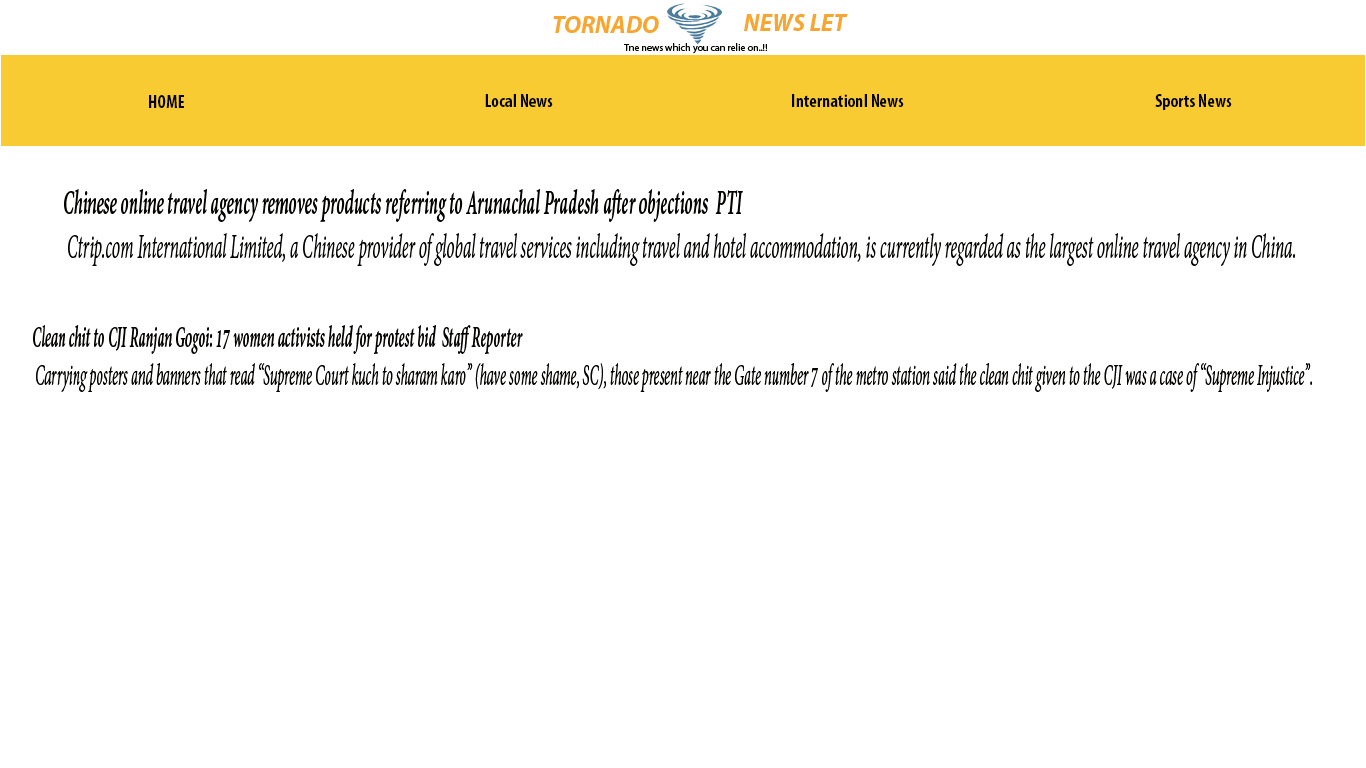
<style>
.page{position:relative;width:1366px;height:768px;background:#ffffff}
.page>*{position:absolute;margin:0}
.t1{font:24px "MyriadPro-BoldIt";color:#f7a631}
.t2{font:10px "MyriadPro-Regular";color:#060400}
.t3{font:18px "MyriadPro-BoldCond";color:#060400}
.t4{font:36.4px "AdobeDevanagari-Italic";color:#030200;scale:0.51 1}
.t5{font:36.4px "AdobeDevanagari-BoldItalic";color:#030200;scale:0.51 1}
.t6{font:31.9px "AdobeDevanagari-Italic";color:#030200;scale:0.48 1}
.t7{font:31.9px "AdobeDevanagari-BoldItalic";color:#030200;scale:0.48 1}
</style>
<div class="page">
<p class="t1" style="left:553px;top:16px;width:106px;height:17px">TORNADO</p>
<p class="t1" style="left:744px;top:14px;width:104px;height:17px">NEWS LET</p>
<p class="t2" style="left:624px;top:43px;width:143px;height:11px">Tne news which you can relie on..!!</p>
<p class="t3" style="left:149px;top:95px;width:35px;height:13px">HOME</p>
<p class="t3" style="left:485px;top:94px;width:68px;height:13px">Local News</p>
<p class="t3" style="left:792px;top:94px;width:112px;height:13px">Internationl News</p>
<p class="t3" style="left:1155px;top:94px;width:77px;height:16px">Sports News</p>
<p class="t4" style="left:64px;top:189px;width:1231px;height:77px"><span class="t5">Chinese online travel agency removes products referring to Arunachal Pradesh after objections  PTI<br></span> Ctrip.com International Limited, a Chinese provider of global travel services including travel and hotel accommodation, is currently regarded as the largest online travel agency in China.</p>
<p class="t6" style="left:33px;top:325px;width:1279px;height:67px"><span class="t7">Clean chit to CJI Ranjan Gogoi: 17 women activists held for protest bid  Staff Reporter<br></span> Carrying posters and banners that read “Supreme Court kuch to sharam karo” (have some shame, SC), those present near the Gate number 7 of the metro station said the clean chit given to the CJI was a case of “Supreme Injustice”.</p>
</div>
